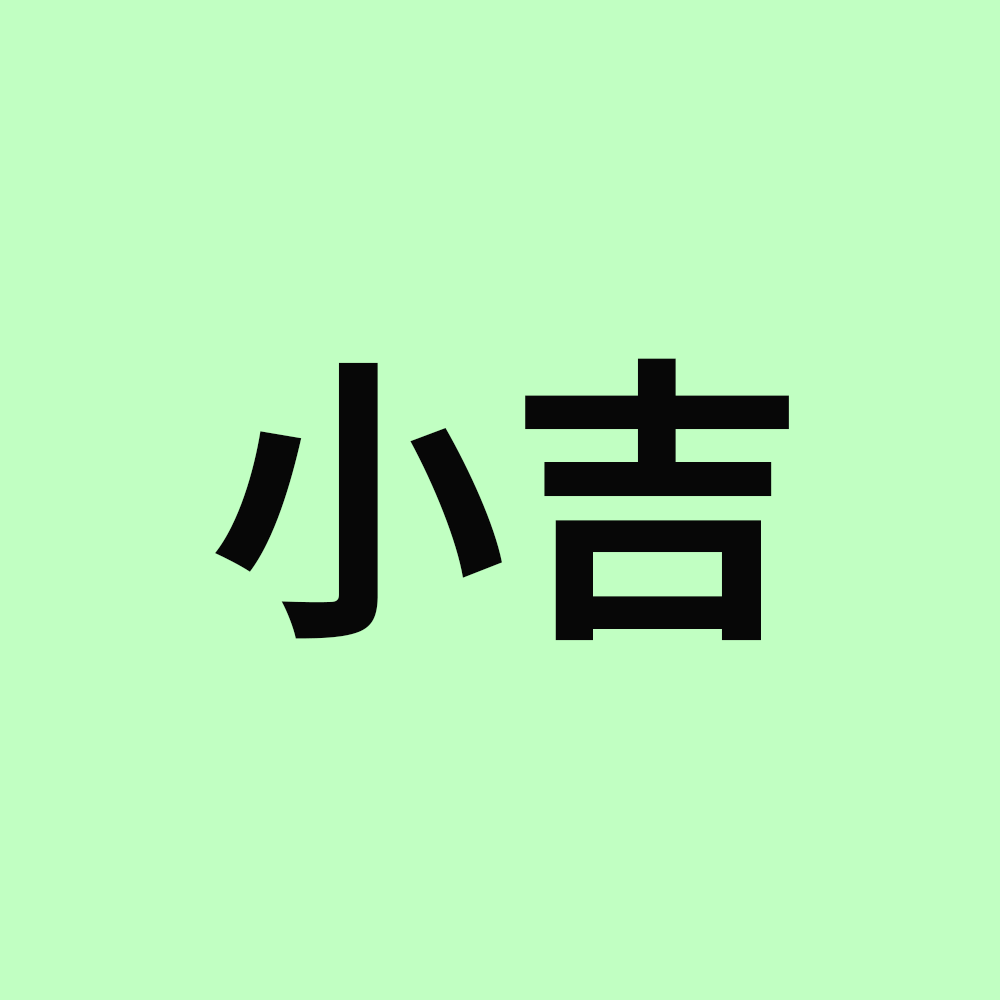
<style>
.page{position:relative;width:1000px;height:1000px;background:#c1ffc2}
.page>*{position:absolute;margin:0}
.t1{font:300px "NotoSansCJKjp-Bold";color:#070707}
</style>
<div class="page">
<p class="t1" style="left:215px;top:358px;width:574px;height:283px">小吉</p>
</div>
